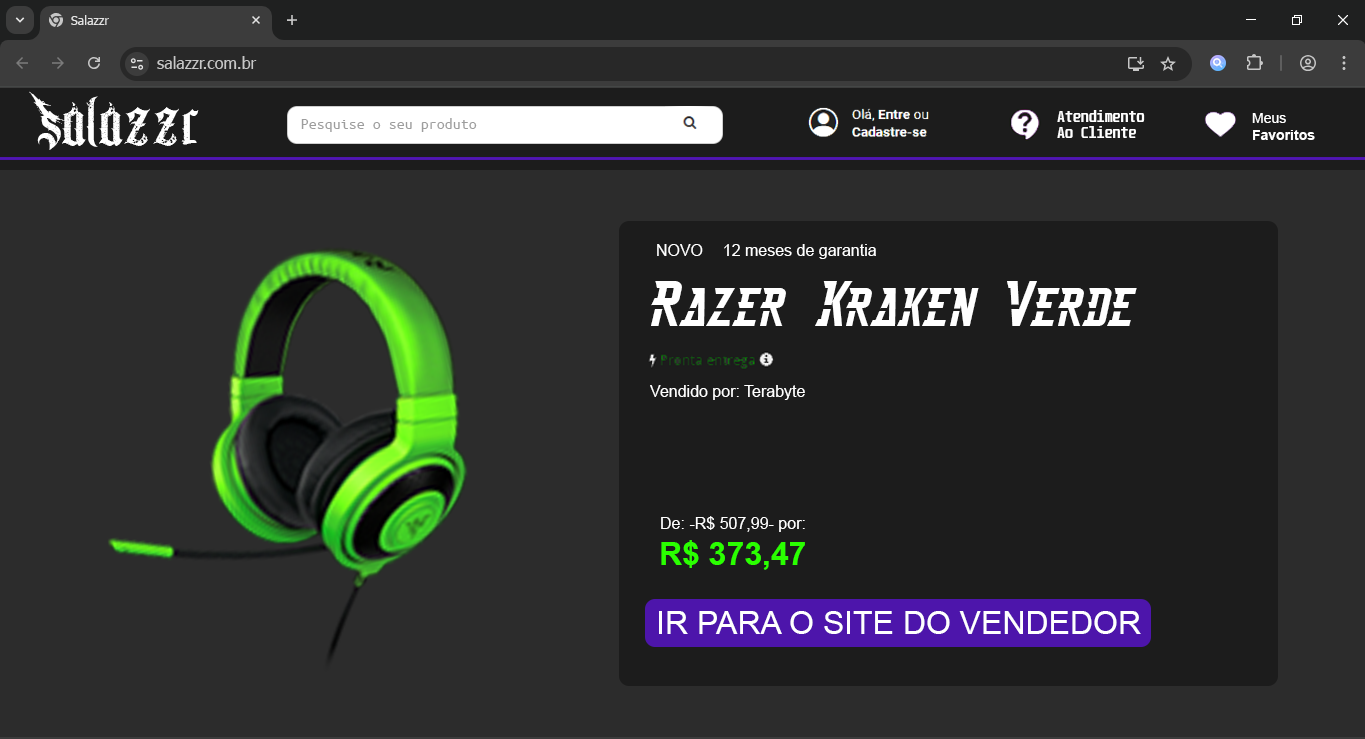
<style>
.page{position:relative;width:1365px;height:739px;background:#2c2c2c}
.page>*{position:absolute;margin:0}
.t1{font:9.4px "Tahoma";color:#e3e3e3}
.t2{font:32.7px "ChaosandPain-CnP";color:#ffffff}
.t3{font:9.9px "Unispace-Bold";color:#ffffff}
.t4{font:10.5px "Arial-BoldMT";color:#ffffff}
.t5{font:10.5px "ArialMT";color:#ffffff}
.t6{font:12px "UbuntuMono-Regular";color:#9d9d9d}
.t7{font:16px "ArialMT";color:#ffffff}
.t8{font:12px "ArialMT";color:#ffffff}
.t9{font:64px "Thunderspeed-Regular";color:#ffffff}
.t10{font:32px "Arial-BoldMT";color:#2aff00}
.t11{font:32px "ArialMT";color:#ffffff}
</style>
<div class="page">
<p class="t1" style="left:71px;top:15px;width:38px;height:10px">Salazzr</p>
<p class="t2" style="left:29px;top:91px;width:170px;height:59px">Salazzr</p>
<p class="t3" style="left:1057px;top:110px;width:88px;height:28px">Atendimento<br>Ao Cliente</p>
<p class="t4" style="left:1252px;top:113px;width:63px;height:27px"><span class="t5">Meus<br></span>Favoritos</p>
<p class="t6" style="left:301px;top:118px;width:176px;height:14px">Pesquise o seu produto</p>
<p class="t7" style="left:657px;top:244px;width:46px;height:12px">NOVO</p>
<p class="t8" style="left:724px;top:244px;width:152px;height:15px">12 meses de garantia</p>
<p class="t9" style="left:651px;top:281px;width:486px;height:45px">Razer Kraken Verde</p>
<p class="t8" style="left:650px;top:385px;width:155px;height:15px">Vendido por: Terabyte</p>
<p class="t8" style="left:661px;top:516px;width:144px;height:16px">De: -R$ 507,99- por:</p>
<p class="t10" style="left:661px;top:540px;width:144px;height:30px">R$ 373,47</p>
<p class="t11" style="left:659px;top:611px;width:482px;height:23px">IR PARA O SITE DO VENDEDOR</p>
</div>
